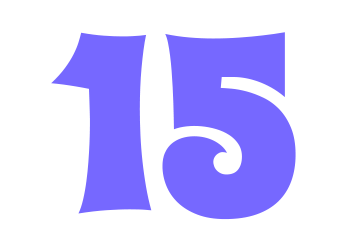
<style>
.page{position:relative;width:354px;height:236px;background:#ffffff}
.page>*{position:absolute;margin:0}
.t1{font:250px "SpicyRice-Regular";color:#7668ff}
</style>
<div class="page">
<p class="t1" style="left:51px;top:32px;width:245px;height:188px">15</p>
</div>
